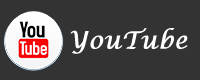
<style>
.page{position:relative;width:200px;height:80px;background:#333333}
.page>*{position:absolute;margin:0}
.t1{font:24px "LucidaCalligraphy-Italic";letter-spacing:0.025em;color:#ffffff;font-weight:bold}
</style>
<div class="page">
<p class="t1" style="left:70px;top:28px;width:118px;height:26px">YouTube</p>
</div>
